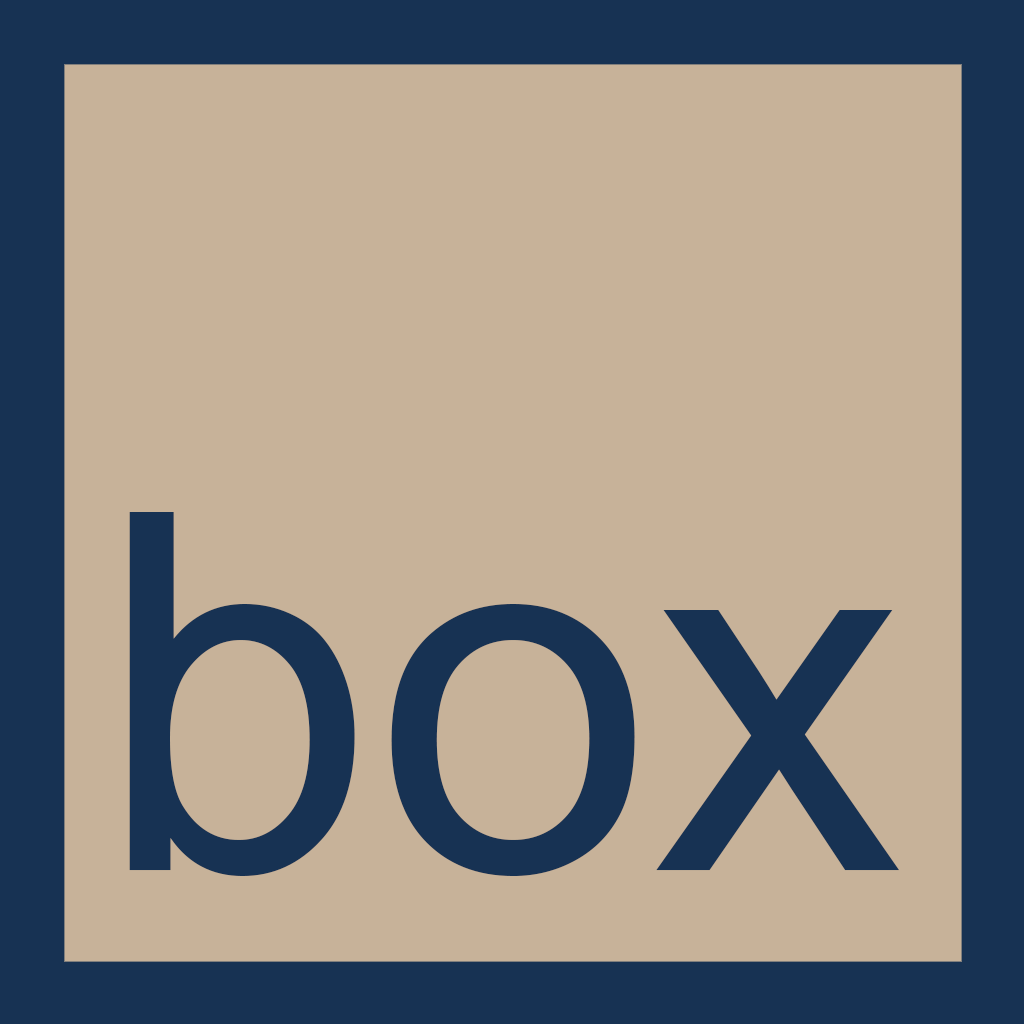
<style>
.page{position:relative;width:1024px;height:1024px;background:#c7b299}
.page>*{position:absolute;margin:0}
.t1{font:500px "ArialMT";color:#173253}
</style>
<div class="page">
<p class="t1" style="left:129px;top:512px;width:770px;height:364px">box</p>
</div>
